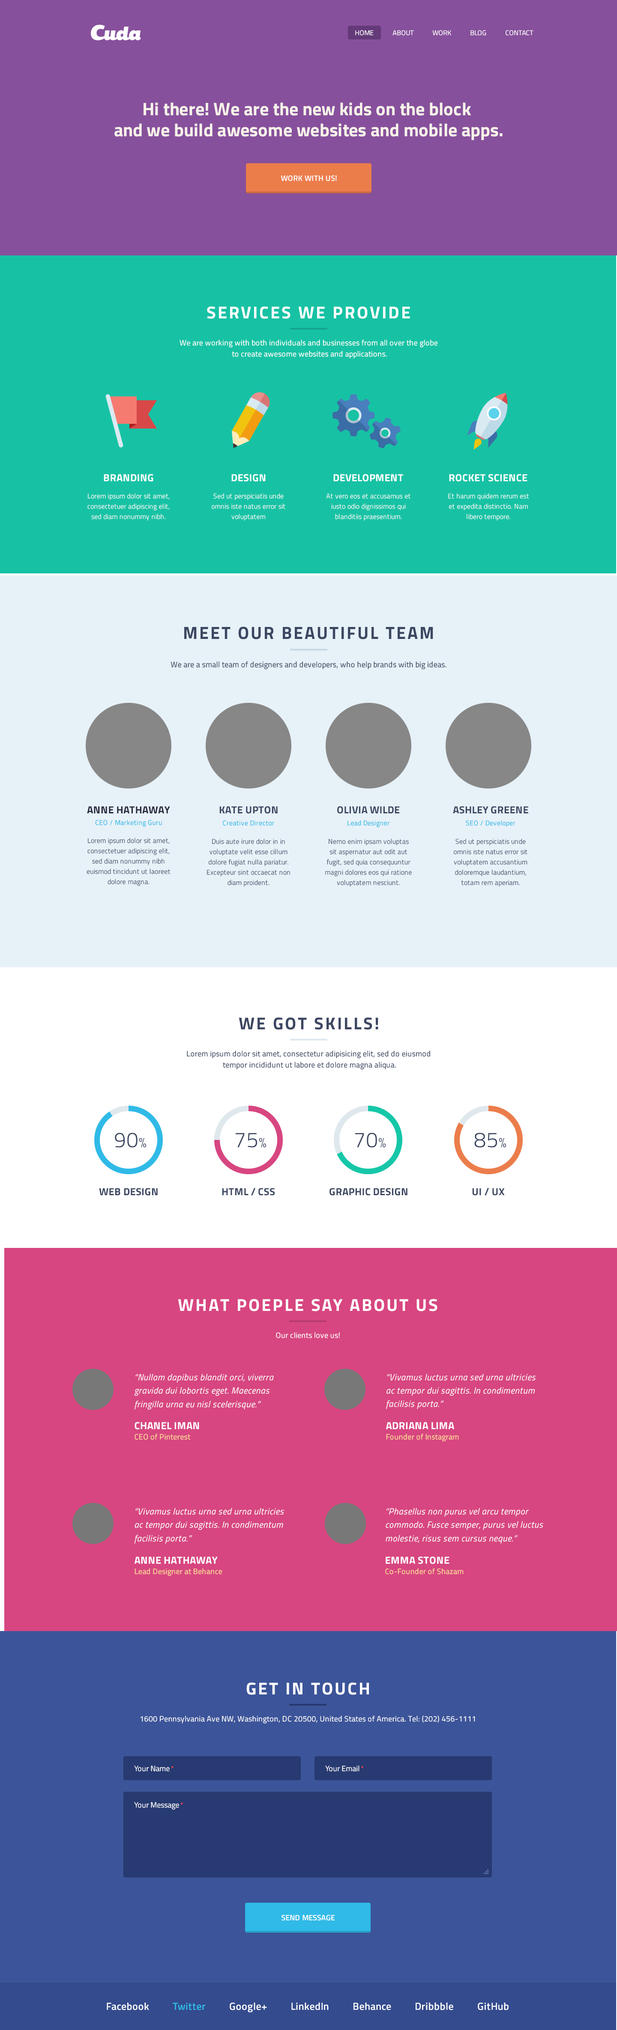
<style>
.page{position:relative;width:617px;height:2030px}
.page>*{position:absolute;margin:0}
.t1{font:6.9px "TitilliumWeb-Regular";color:#ffffff;text-transform:uppercase}
.t2{font:18.1px/20.9px "TitilliumWeb-Bold";color:#f7f3ea}
.t3{font:7.7px "TitilliumWeb-SemiBold";letter-spacing:0.02em;color:#ffffff}
.t4{font:17.1px "TitilliumWeb-Bold";letter-spacing:0.1em;color:#ffffff}
.t5{font:7.7px/11.1px "TitilliumWeb-Regular";letter-spacing:0.02em;color:#ffffff}
.t6{font:10.3px "TitilliumWeb-Bold";letter-spacing:0.02em;color:#ffffff;text-transform:uppercase}
.t7{font:6.9px/10.3px "TitilliumWeb-Light";letter-spacing:0.02em;color:#ffffff}
.t8{font:17.7px "TitilliumWeb-Bold";letter-spacing:0.1em;color:#3c4761;scale:0.97 1}
.t9{font:8px "TitilliumWeb-Regular";letter-spacing:0.02em;color:#3c4761;scale:0.97 1}
.t10{font:10.3px "TitilliumWeb-Bold";letter-spacing:0.02em;color:#27283d;text-transform:uppercase}
.t11{font:10.3px "TitilliumWeb-Bold";letter-spacing:0.02em;color:#3c4761;text-transform:uppercase}
.t12{font:6.9px "TitilliumWeb-Regular";letter-spacing:0.02em;color:#30bae7}
.t13{font:6.9px/10.3px "TitilliumWeb-Light";letter-spacing:0.02em;color:#3c4761}
.t14{font:17.1px "TitilliumWeb-Bold";letter-spacing:0.1em;color:#3c4761}
.t15{font:7.7px/11.1px "TitilliumWeb-Regular";letter-spacing:0.02em;color:#3c4761}
.t16{font:21.4px "TitilliumWeb-Light";letter-spacing:0.02em;color:#3c4761;text-transform:uppercase}
.t17{font:13.7px "TitilliumWeb-Light";letter-spacing:0.02em;color:#3c4761;text-transform:uppercase}
.t18{font:7.7px "TitilliumWeb-Regular";letter-spacing:0.02em;color:#ffffff}
.t19{font:9px/13.4px "TitilliumWeb-Italic";letter-spacing:0.02em;color:#ffffff}
.t20{font:10.3px "TitilliumWeb-Bold";letter-spacing:0.02em;color:#ffffff}
.t21{font:7.7px "TitilliumWeb-Regular";letter-spacing:0.02em;color:#ffdd99}
.t22{font:7.7px "TitilliumWeb-Regular";color:#ffffff}
.t23{font:6.9px "ArialMT";color:#ff4444}
.t24{font:10.3px "TitilliumWeb-SemiBold";letter-spacing:0.02em;color:#ffffff}
.t25{font:10.3px "TitilliumWeb-SemiBold";letter-spacing:0.02em;color:#30bae7}
</style>
<div class="page">
<p class="t1" style="left:355px;top:30px;width:179px;height:6px">Home           About           WORK           Blog           Contact</p>
<p class="t2" style="left:114px;top:102px;width:389px;height:38px;text-align:center">Hi there! We are the new kids on the block <br>and we build awesome websites and mobile apps.</p>
<p class="t3" style="left:281px;top:175px;width:56px;height:6px">WORK WITH US!</p>
<p class="t4" style="left:207px;top:306px;width:203px;height:13px">SERVICES WE PROVIDE</p>
<p class="t5" style="left:180px;top:339px;width:258px;height:20px;text-align:center">We are working with both individuals and businesses from all over the globe <br>to create awesome websites and applications.</p>
<p class="t6" style="left:104px;top:474px;width:49px;height:8px">Branding</p>
<p class="t6" style="left:231px;top:474px;width:35px;height:8px">Design</p>
<p class="t6" style="left:333px;top:474px;width:70px;height:8px">Development</p>
<p class="t6" style="left:449px;top:474px;width:79px;height:8px">ROCKET SCIENCE</p>
<p class="t7" style="left:87px;top:493px;width:83px;height:28px;text-align:center">Lorem ipsum dolor sit amet, <br>consectetuer adipiscing elit, sed diam nonummy nibh.</p>
<p class="t7" style="left:211px;top:493px;width:74px;height:28px;text-align:center">Sed ut perspiciatis unde omnis iste natus error sit voluptatem</p>
<p class="t7" style="left:326px;top:493px;width:85px;height:28px;text-align:center">At vero eos et accusamus et iusto odio dignissimos qui blanditiis praesentium.</p>
<p class="t7" style="left:448px;top:493px;width:81px;height:28px;text-align:center">Et harum quidem rerum est et expedita distinctio. Nam libero tempore.</p>
<p class="t8" style="left:184px;top:627px;width:249px;height:12px">MEET OUR BEAUTIFUL TEAM</p>
<p class="t9" style="left:171px;top:661px;width:276px;height:8px">We are a small team of designers and developers, who help brands with big ideas.</p>
<p class="t10" style="left:87px;top:806px;width:83px;height:7px">ANNE HATHAWAY</p>
<p class="t11" style="left:219px;top:806px;width:59px;height:8px">Kate Upton</p>
<p class="t11" style="left:337px;top:806px;width:63px;height:8px">Olivia Wilde</p>
<p class="t11" style="left:453px;top:806px;width:75px;height:8px">Ashley Greene</p>
<p class="t12" style="left:95px;top:820px;width:67px;height:7px">CEO / Marketing Guru</p>
<p class="t12" style="left:223px;top:820px;width:51px;height:6px">Creative Director</p>
<p class="t12" style="left:348px;top:820px;width:42px;height:7px">Lead Designer</p>
<p class="t12" style="left:466px;top:820px;width:50px;height:7px">SEO / Developer</p>
<p class="t13" style="left:87px;top:838px;width:84px;height:48px;text-align:center">Lorem ipsum dolor sit amet, <br>consectetuer adipiscing elit, sed diam nonummy nibh euismod tincidunt ut laoreet dolore magna.</p>
<p class="t13" style="left:207px;top:839px;width:83px;height:48px;text-align:center">Duis aute irure dolor in in voluptate velit esse cillum dolore fugiat nulla pariatur. Excepteur sint occaecat non diam proident.</p>
<p class="t13" style="left:325px;top:839px;width:87px;height:48px;text-align:center">Nemo enim ipsam voluptas sit aspernatur aut odit aut fugit, sed quia consequuntur magni dolores eos qui ratione voluptatem nesciunt.</p>
<p class="t13" style="left:453px;top:839px;width:75px;height:48px;text-align:center">Sed ut perspiciatis unde omnis iste natus error sit voluptatem accusantium doloremque laudantium, totam rem aperiam.</p>
<p class="t14" style="left:239px;top:1017px;width:139px;height:13px">WE GOT SKILLS!</p>
<p class="t15" style="left:187px;top:1050px;width:243px;height:20px;text-align:center">Lorem ipsum dolor sit amet, consectetur adipisicing elit, sed do eiusmod <br>tempor incididunt ut labore et dolore magna aliqua.</p>
<p class="t16" style="left:115px;top:1133px;width:32px;height:15px">90<span class="t17">%</span></p>
<p class="t16" style="left:236px;top:1133px;width:31px;height:15px">75<span class="t17">%</span></p>
<p class="t16" style="left:355px;top:1133px;width:31px;height:15px">70<span class="t17">%</span></p>
<p class="t16" style="left:474px;top:1133px;width:33px;height:15px">85<span class="t17">%</span></p>
<p class="t11" style="left:99px;top:1188px;width:59px;height:8px">Web Design</p>
<p class="t11" style="left:222px;top:1188px;width:53px;height:8px">HTML / CSS</p>
<p class="t11" style="left:330px;top:1188px;width:78px;height:8px">GRAPHIC DESIGN</p>
<p class="t11" style="left:472px;top:1188px;width:33px;height:8px">UI / UX</p>
<p class="t4" style="left:178px;top:1299px;width:260px;height:12px">WHAT POEPLE SAY ABOUT US</p>
<p class="t18" style="left:276px;top:1332px;width:64px;height:6px">Our clients love us!</p>
<p class="t19" style="left:134px;top:1374px;width:140px;height:36px">“Nullam dapibus blandit orci, viverra gravida dui lobortis eget. Maecenas fringilla urna eu nisl scelerisque.”</p>
<p class="t19" style="left:386px;top:1374px;width:150px;height:35px">“Vivamus luctus urna sed urna ultricies ac tempor dui sagittis. In condimentum facilisis porta.”</p>
<p class="t6" style="left:135px;top:1422px;width:64px;height:8px">Chanel Iman</p>
<p class="t20" style="left:386px;top:1422px;width:68px;height:7px">ADRIANA LIMA</p>
<p class="t21" style="left:135px;top:1434px;width:56px;height:6px">CEO of Pinterest</p>
<p class="t21" style="left:386px;top:1434px;width:73px;height:8px">Founder of Instagram</p>
<p class="t19" style="left:134px;top:1508px;width:150px;height:36px">“Vivamus luctus urna sed urna ultricies ac tempor dui sagittis. In condimentum facilisis porta.”</p>
<p class="t19" style="left:386px;top:1508px;width:157px;height:36px">“Phasellus non purus vel arcu tempor commodo. Fusce semper, purus vel luctus molestie, risus sem cursus neque.”</p>
<p class="t6" style="left:135px;top:1557px;width:83px;height:7px">ANNE HATHAWAY</p>
<p class="t6" style="left:386px;top:1557px;width:64px;height:7px">EMMA STONE</p>
<p class="t21" style="left:135px;top:1568px;width:87px;height:8px">Lead Designer at Behance</p>
<p class="t21" style="left:385px;top:1568px;width:79px;height:7px">Co-Founder of Shazam</p>
<p class="t4" style="left:246px;top:1683px;width:123px;height:12px">GET IN TOUCH</p>
<p class="t18" style="left:140px;top:1716px;width:335px;height:8px">1600 Pennsylvania Ave NW, Washington, DC 20500, United States of America. Tel: (202) 456-1111</p>
<p class="t22" style="left:134px;top:1766px;width:40px;height:6px">Your Name <span class="t23">*</span></p>
<p class="t22" style="left:325px;top:1765px;width:38px;height:7px">Your Email <span class="t23">*</span></p>
<p class="t22" style="left:134px;top:1802px;width:49px;height:8px">Your Message <span class="t23">*</span></p>
<p class="t3" style="left:282px;top:1915px;width:53px;height:6px">SEND MESSAGE</p>
<p class="t24" style="left:107px;top:2003px;width:402px;height:10px">Facebook          <span class="t25">Twitter</span>          Google+          LinkedIn          Behance          Dribbble          GitHub</p>
</div>
